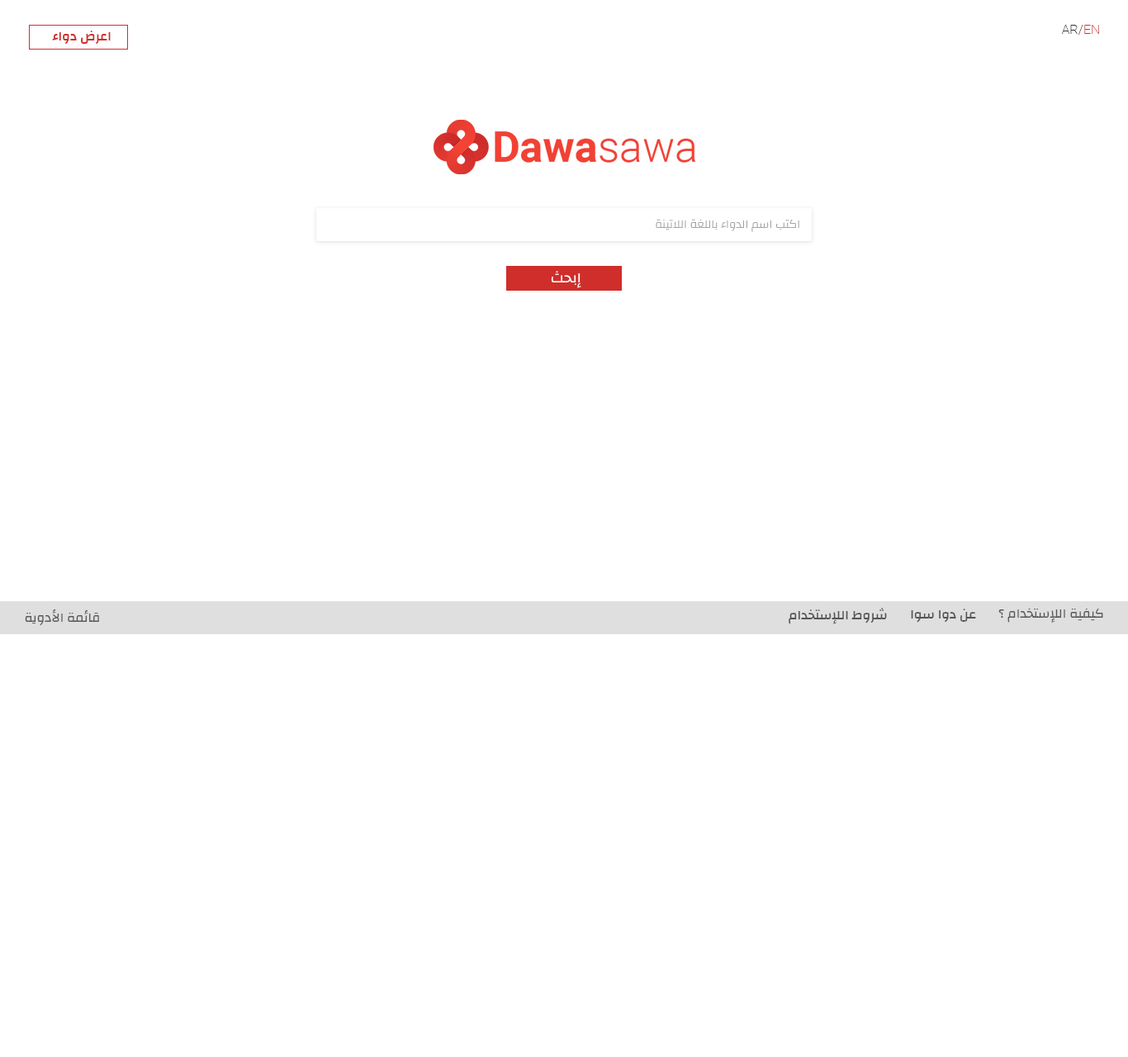
<style>
.page{position:relative;width:1128px;height:1057px;background:#ffffff}
.page>*{position:absolute;margin:0}
.t1{font:13.2px "Roboto-Thin";color:#333333}
.t2{font:13.2px "Roboto-Thin";color:#cf2e2b}
.t3{font:13.2px "Changa-SemiBold";color:#cf2e2b}
.t4{font:11.6px "Changa-Light";color:#a5a5a5}
.t5{font:14.9px "Changa-Regular";color:#ffffff}
.t6{font:13.2px "Changa-Regular";color:#555555}
.t7{font:13.2px "Changa-Medium";color:#555555}
</style>
<div class="page">
<p class="t1" style="left:1061px;top:25px;width:38px;height:10px">AR/<span class="t2">EN</span></p>
<p class="t3" style="left:52px;top:31px;width:59px;height:14px">اعرض دواء</p>
<p class="t4" style="left:656px;top:219px;width:143px;height:13px">اكتب اسم الدواء باللغة اللاتينة</p>
<p class="t5" style="left:551px;top:271px;width:30px;height:17px">إبحث</p>
<p class="t6" style="left:25px;top:609px;width:74px;height:17px">قائمة الأدوية</p>
<p class="t7" style="left:789px;top:608px;width:98px;height:16px">شروط اللإستخدام</p>
<p class="t7" style="left:911px;top:609px;width:65px;height:14px">عن دوا سوا</p>
<p class="t6" style="left:998px;top:609px;width:105px;height:14px">كيفية اللإستخدام ؟</p>
</div>
